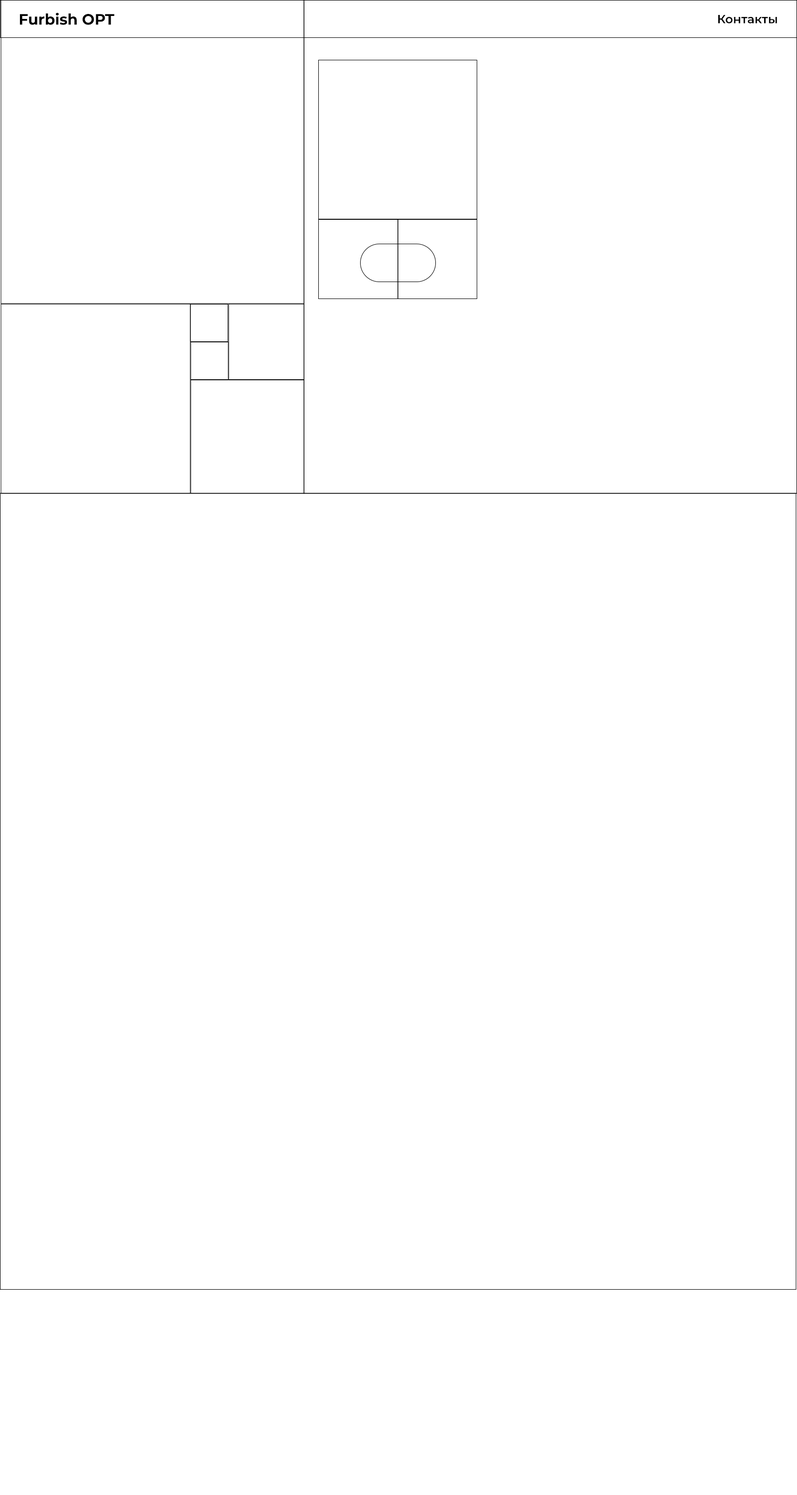
<style>
.page{position:relative;width:797px;height:1495px;background:#ffffff}
.page>*{position:absolute;margin:0}
.t1{font:15px "Montserrat-Bold";color:#000000}
.t2{font:12px "Montserrat-SemiBold";color:#000000}
</style>
<div class="page">
<p class="t1" style="left:20px;top:12px;width:95px;height:13px">Furbish OPT</p>
<p class="t2" style="left:718px;top:15px;width:60px;height:8px">Контакты</p>
</div>
